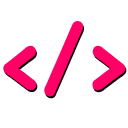
<style>
.page{position:relative;width:128px;height:128px;background:#ffffff}
.page>*{position:absolute;margin:0}
.t1{font:83.3px "Chalkboard-Bold";color:#ff0066}
</style>
<div class="page">
<p class="t1" style="left:3px;top:21px;width:123px;height:76px">&lt;/&gt;</p>
</div>
